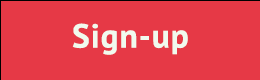
<style>
.page{position:relative;width:260px;height:80px;background:#e63946}
.page>*{position:absolute;margin:0}
.t1{font:33.3px "PTSans-Bold";letter-spacing:0.03em;color:#f1faee}
</style>
<div class="page">
<p class="t1" style="left:72px;top:23px;width:116px;height:32px">Sign-up</p>
</div>
